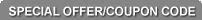
<style>
.page{position:relative;width:202px;height:20px;background:#858585}
.page>*{position:absolute;margin:0}
.t1{font:12px "Arial-BoldMT";letter-spacing:-0.01em;color:#ffffff}
</style>
<div class="page">
<p class="t1" style="left:9px;top:6px;width:186px;height:10px">SPECIAL OFFER/COUPON CODE</p>
</div>
